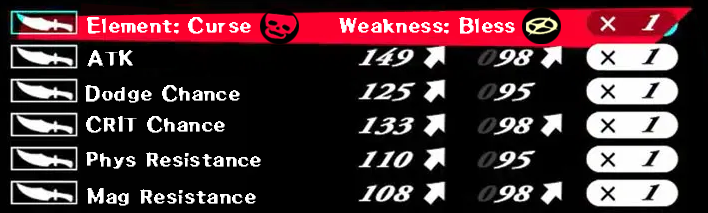
<style>
.page{position:relative;width:708px;height:213px;background:#000000}
.page>*{position:absolute;margin:0}
.t1{font:28px "p5hatty";letter-spacing:0.05em}
.t2{font:28px "p5hatty";letter-spacing:0.05em;color:#ffffff}
</style>
<div class="page">
<p class="t1" style="left:87px;top:17px;width:428px;height:17px">Element: Curse   Weakness: Bless</p>
<p class="t2" style="left:87px;top:50px;width:46px;height:17px">ATK</p>
<p class="t2" style="left:85px;top:85px;width:155px;height:18px">Dodge Chance</p>
<p class="t2" style="left:86px;top:116px;width:139px;height:17px">CRIT Chance</p>
<p class="t1" style="left:86px;top:152px;width:175px;height:17px">Phys Resistance</p>
<p class="t1" style="left:87px;top:188px;width:169px;height:18px">Mag Resistance</p>
</div>
